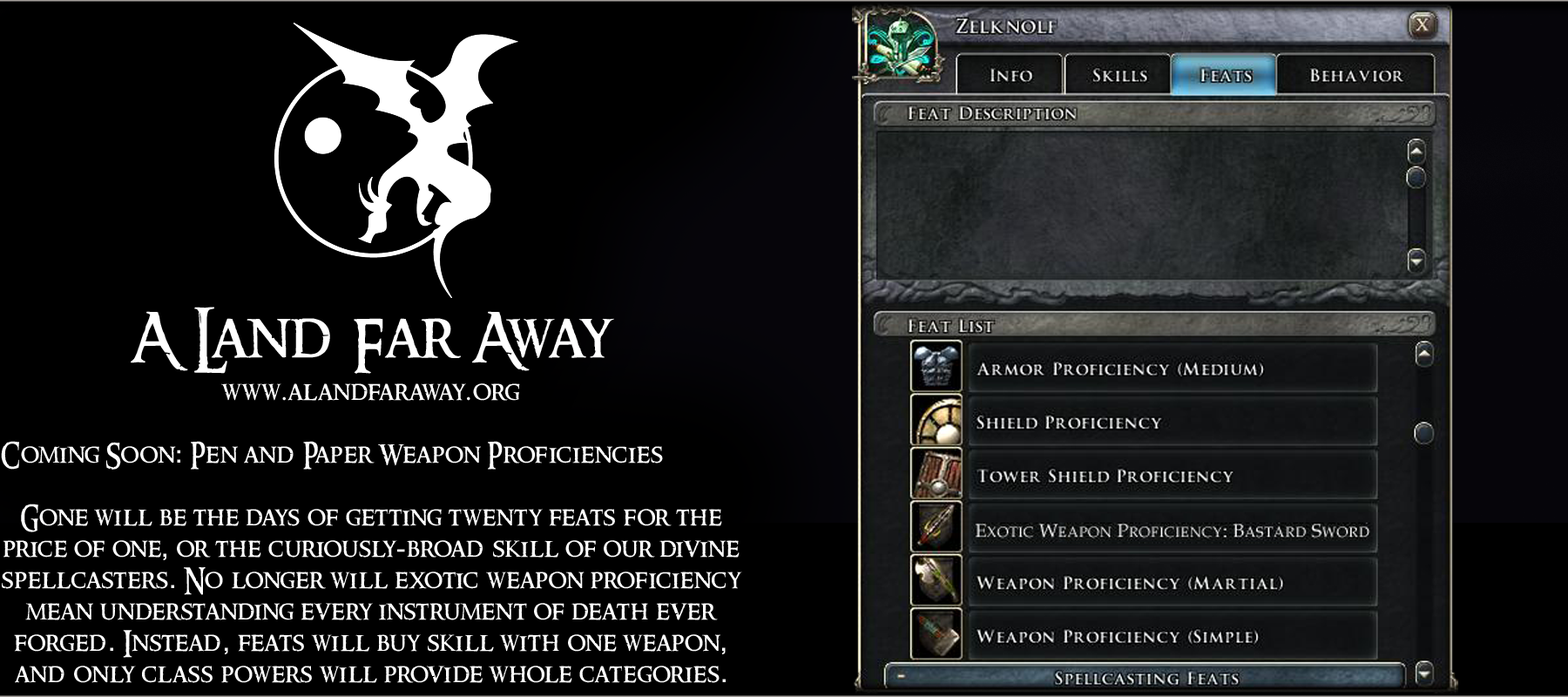
<style>
.page{position:relative;width:1568px;height:697px;background:#000000}
.page>*{position:absolute;margin:0}
.t1{font:26.1px "RingbearerMedium";letter-spacing:0.025em;color:#ffffff}
.t2{font:62.7px "RingbearerMedium";letter-spacing:0.025em;color:#ffffff}
.t3{font:26.1px "BookAntiqua";letter-spacing:0.025em;color:#ffffff}
.t4{font:26.1px "Rockwell";letter-spacing:0.025em;color:#ffffff}
</style>
<div class="page">
<p class="t1" style="left:1px;top:307px;width:741px;height:376px;text-align:center"><span class="t2">A Land Far Away<br><br></span>www<span class="t3">.</span>alandfaraway<span class="t3">.</span>org<br><br>Coming Soon<span class="t4">:</span> Pen and Paper Weapon Proficiencies<br><br>Gone will be the days of getting twenty feats for the price of one<span class="t4">,</span> or the curiously<span class="t4">-</span>broad skill of our divine spellcasters<span class="t4">.</span> No longer will exotic weapon proficiency mean understanding every instrument of death ever forged<span class="t4">.</span> Instead<span class="t4">,</span> feats will buy skill with one weapon<span class="t4">,</span> and only class powers will provide whole categories<span class="t4">.</span></p>
</div>
